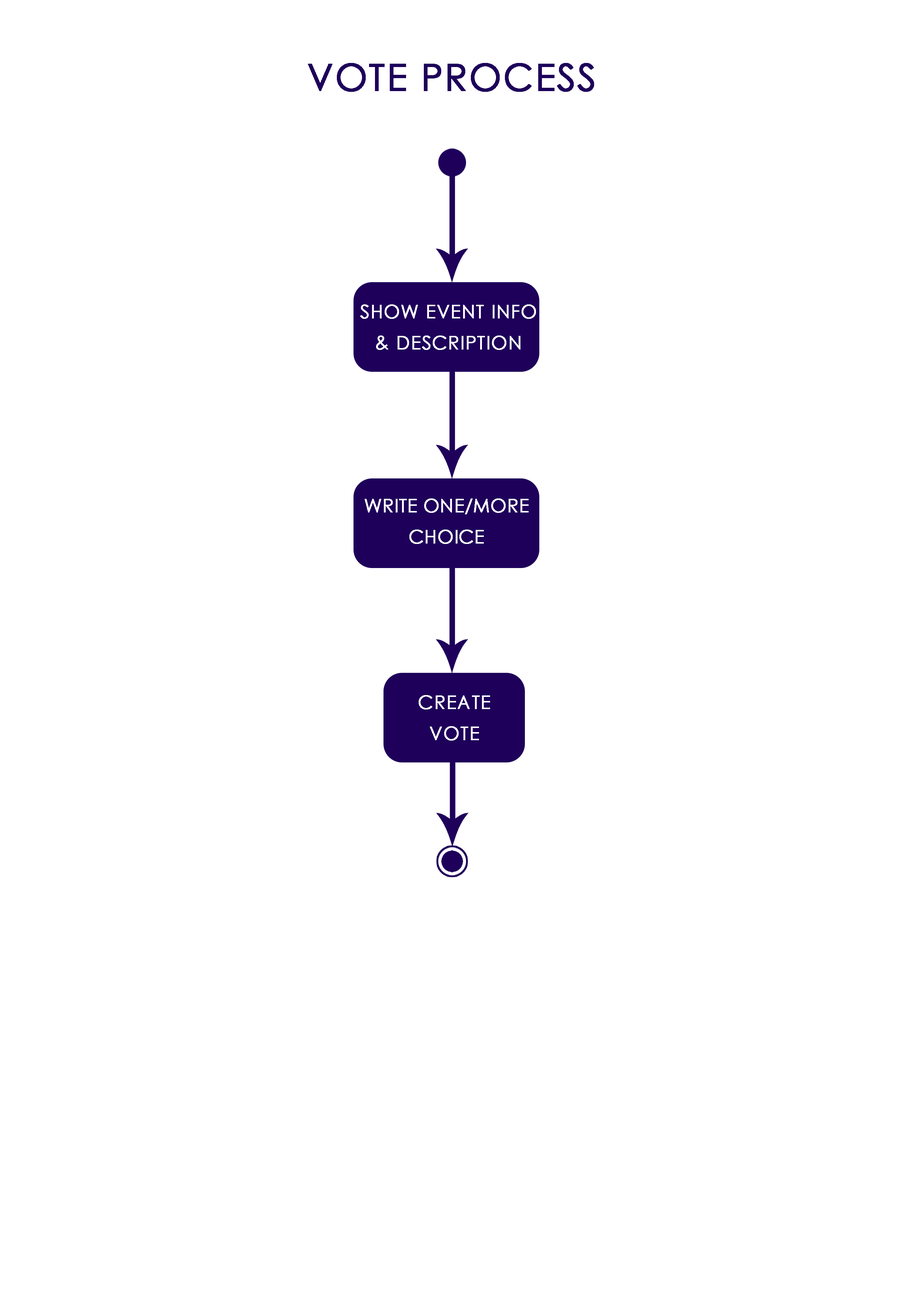
<style>
.page{position:relative;width:918px;height:1299px;background:#ffffff}
.page>*{position:absolute;margin:0}
.t1{font:37px "CenturyGothic";letter-spacing:0.025em;color:#1e005a;text-transform:uppercase;font-weight:bold}
.t2{font:18.5px/30.9px "CenturyGothic";letter-spacing:0.025em;color:#ffffff;text-transform:uppercase;font-weight:bold}
.t3{font:18.5px/30.9px "CenturyGothic";color:#ffffff;text-transform:uppercase;font-weight:bold}
</style>
<div class="page">
<p class="t1" style="left:308px;top:63px;width:286px;height:29px">vote process</p>
<p class="t2" style="left:360px;top:304px;width:176px;height:46px;text-align:center">show event info<br>&amp; description</p>
<p class="t3" style="left:365px;top:498px;width:164px;height:46px;text-align:center">write one/more choice</p>
<p class="t2" style="left:419px;top:695px;width:71px;height:45px;text-align:center">create<br>vote</p>
</div>
